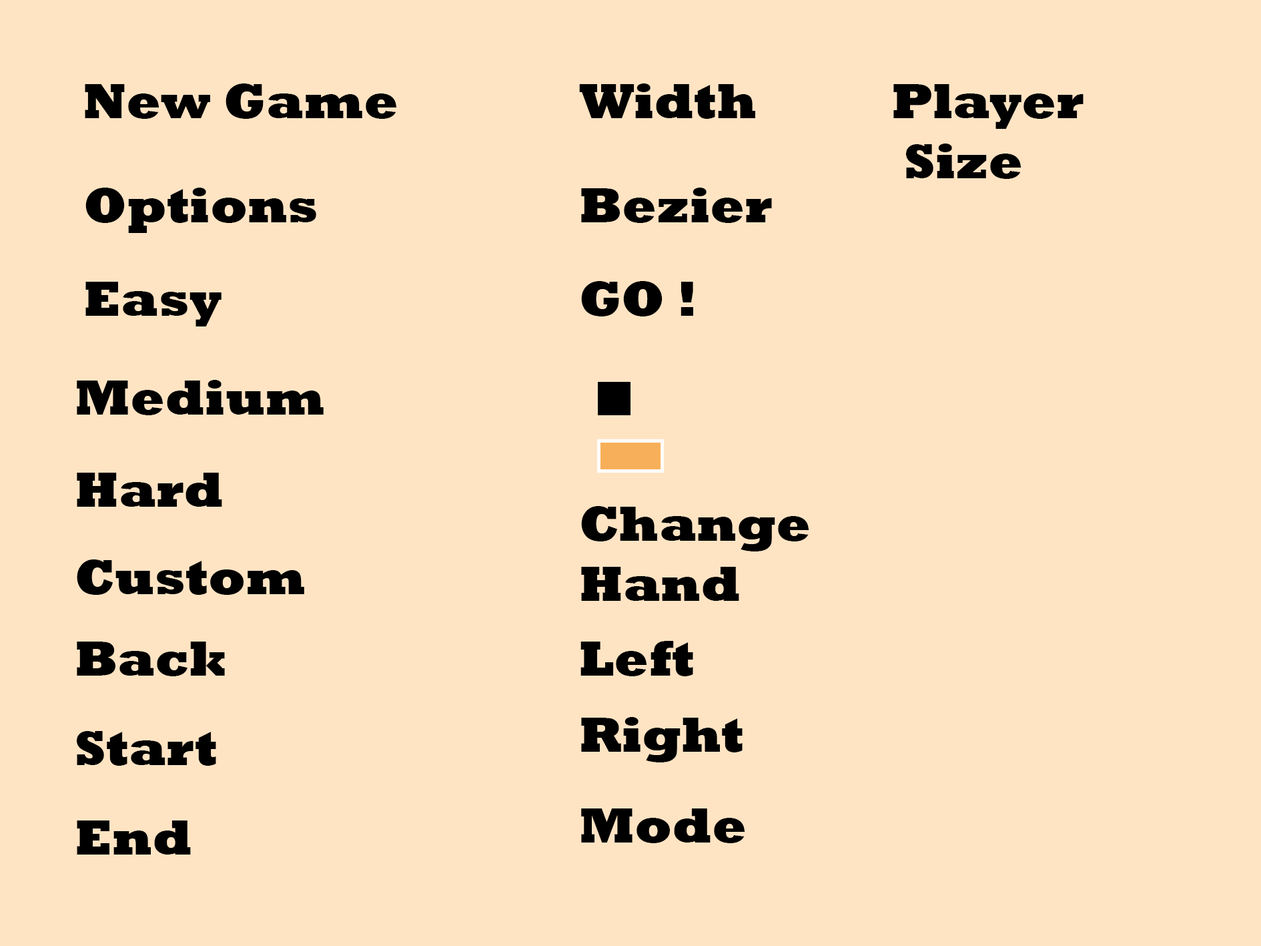
<style>
.page{position:relative;width:1261px;height:946px;background:#ffe4c4}
.page>*{position:absolute;margin:0}
.t1{font:50px "Rockwell-ExtraBold";color:#000000}
</style>
<div class="page">
<p class="t1" style="left:85px;top:83px;width:312px;height:36px">New Game</p>
<p class="t1" style="left:579px;top:83px;width:176px;height:36px">Width</p>
<p class="t1" style="left:893px;top:84px;width:191px;height:95px">Player<br> Size</p>
<p class="t1" style="left:85px;top:188px;width:231px;height:45px">Options</p>
<p class="t1" style="left:581px;top:188px;width:191px;height:35px">Bezier</p>
<p class="t1" style="left:85px;top:282px;width:137px;height:44px">Easy</p>
<p class="t1" style="left:581px;top:281px;width:112px;height:35px">GO !</p>
<p class="t1" style="left:77px;top:380px;width:247px;height:35px">Medium</p>
<p class="t1" style="left:77px;top:472px;width:145px;height:34px">Hard</p>
<p class="t1" style="left:581px;top:506px;width:228px;height:95px">Change <br>Hand</p>
<p class="t1" style="left:77px;top:641px;width:148px;height:35px">Back</p>
<p class="t1" style="left:581px;top:641px;width:112px;height:35px">Left</p>
<p class="t1" style="left:581px;top:717px;width:162px;height:45px">Right</p>
<p class="t1" style="left:77px;top:731px;width:139px;height:34px">Start</p>
<p class="t1" style="left:581px;top:808px;width:164px;height:35px">Mode</p>
<p class="t1" style="left:77px;top:820px;width:114px;height:34px">End</p>
</div>
